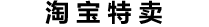
<style>
.page{position:relative;width:209px;height:27px;background:#ffffff}
.page>*{position:absolute;margin:0}
.t1{font:24px "MicrosoftYaHei-Bold";color:#000000}
.t2{font:18px "MicrosoftYaHei";color:#000000}
</style>
<div class="page">
<p class="t1" style="left:45px;top:0px;width:117px;height:24px"><span class="t2">  </span> 淘 宝 特 卖</p>
</div>
